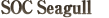
<style>
.page{position:relative;width:109px;height:18px;background:#ffffff}
.page>*{position:absolute;margin:0}
.t1{font:18px "RyuminPro-ExBold";letter-spacing:-0.06em;color:#4a3f32;font-weight:bold;scale:0.9 1}
</style>
<div class="page">
<p class="t1" style="left:1px;top:0px;width:91px;height:18px">SOC Seagull</p>
</div>
